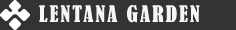
<style>
.page{position:relative;width:236px;height:30px;background:#333333}
.page>*{position:absolute;margin:0}
.t1{font:21px "BernardMT-Condensed";letter-spacing:0.1em;color:#f5f6f7;text-transform:uppercase}
</style>
<div class="page">
<p class="t1" style="left:39px;top:5px;width:161px;height:18px">LENTANA GARDEN</p>
</div>
